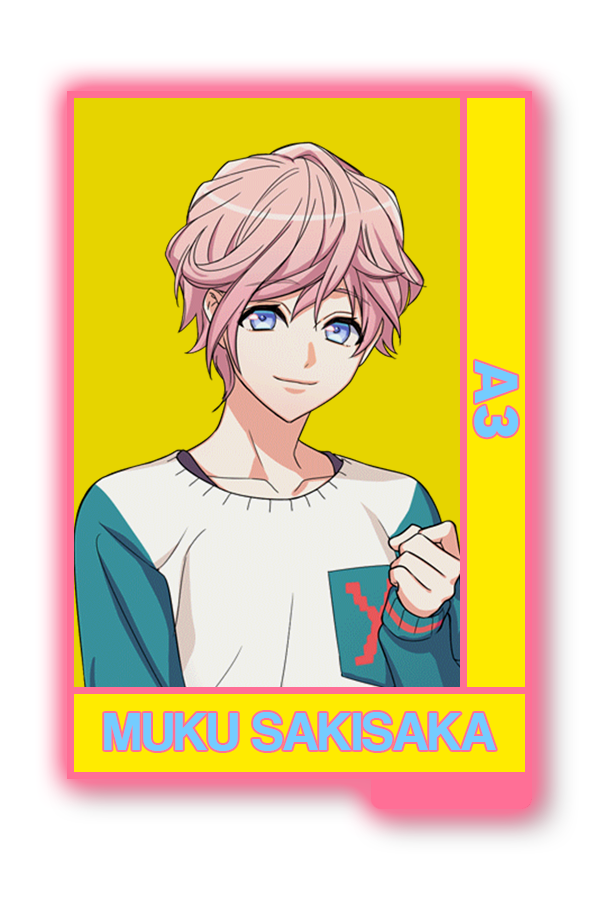
<style>
.page{position:relative;width:600px;height:900px;background:#ffffff}
.page>*{position:absolute;margin:0}
.t1{font:60.5px "MADETOMMY-Bold";color:#74ccff}
.t2{font:54.9px "CoolveticaRg-Regular";color:#74ccff}
</style>
<div class="page">
<p class="t1" style="left:474px;top:360px;width:44px;height:78px;rotate:90deg">A3</p>
<p class="t2" style="left:104px;top:712px;width:392px;height:39px">MUKU SAKISAKA</p>
</div>
